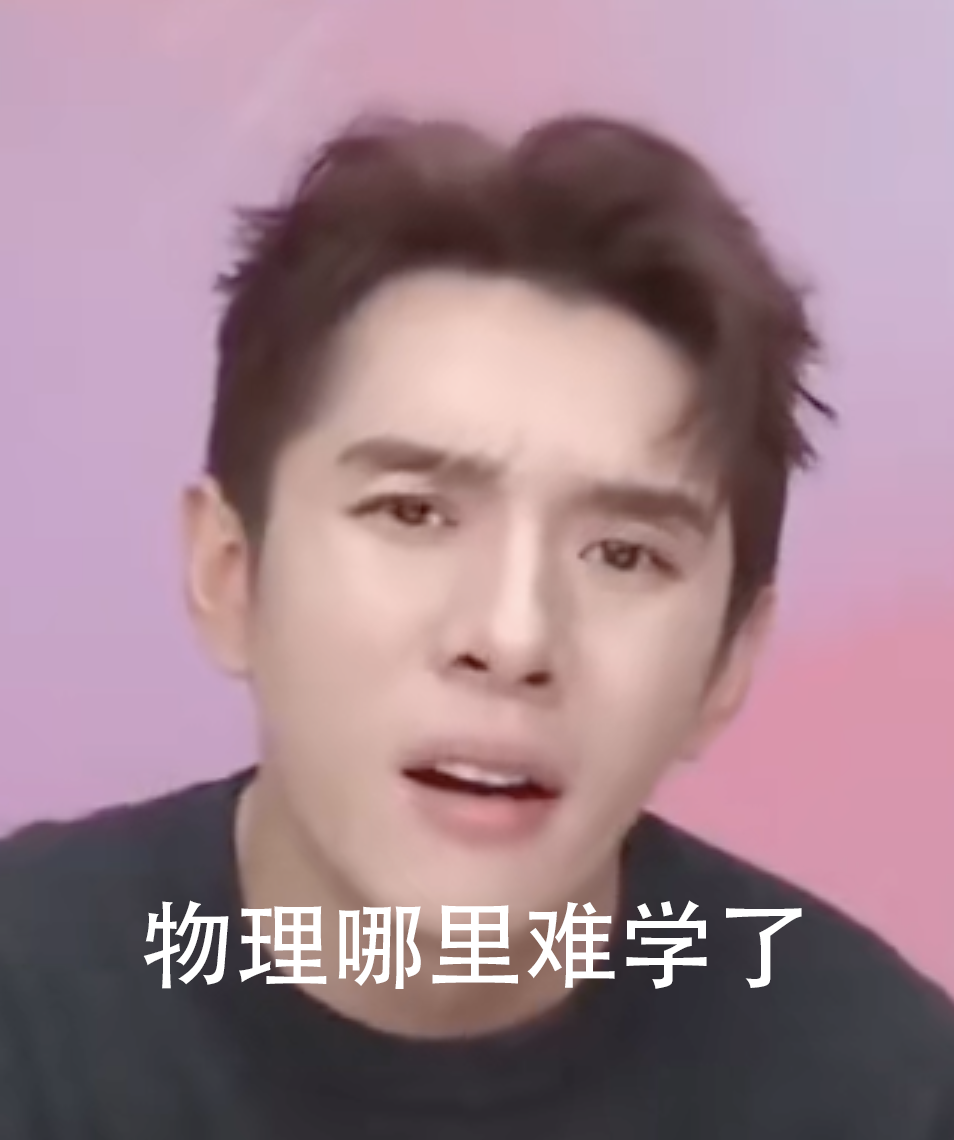
<style>
.page{position:relative;width:954px;height:1140px}
.page>*{position:absolute;margin:0}
.t1{font:96px "AdobeHeitiStd-Regular";color:#ffffff}
</style>
<div class="page">
<p class="t1" style="left:143px;top:900px;width:659px;height:89px">物理哪里难学了</p>
</div>
